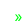
<style>
.page{position:relative;width:24px;height:24px;background:#ffffff}
.page>*{position:absolute;margin:0}
.t1{font:17.8px "MyriadPro-Regular";color:#00ff12}
</style>
<div class="page">
<p class="t1" style="left:15px;top:14px;width:7px;height:7px">»</p>
</div>
